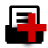
<style>
.page{position:relative;width:48px;height:48px;background:#ffffff}
.page>*{position:absolute;margin:0}
.t1{font:60px "CenturyGothic-Bold";letter-spacing:0.03em;color:#ce0000}
</style>
<div class="page">
<p class="t1" style="left:17px;top:13px;width:30px;height:29px">+</p>
</div>
